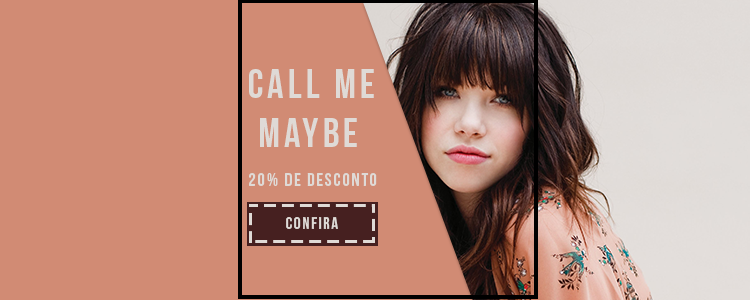
<style>
.page{position:relative;width:750px;height:300px;background:#d18b74}
.page>*{position:absolute;margin:0}
.t1{font:40.5px "BebasNeue";letter-spacing:0.1em;color:#dfdad6}
.t2{font:18.3px "BebasNeue";letter-spacing:0.1em;color:#dfdad6}
.t3{font:17px "BebasNeue";letter-spacing:0.1em;color:#dfdad6}
</style>
<div class="page">
<p class="t1" style="left:249px;top:69px;width:125px;height:78px">Call me<br> Maybe</p>
<p class="t2" style="left:249px;top:173px;width:128px;height:13px">20% de desconto</p>
<p class="t3" style="left:286px;top:217px;width:52px;height:12px">confira</p>
</div>
